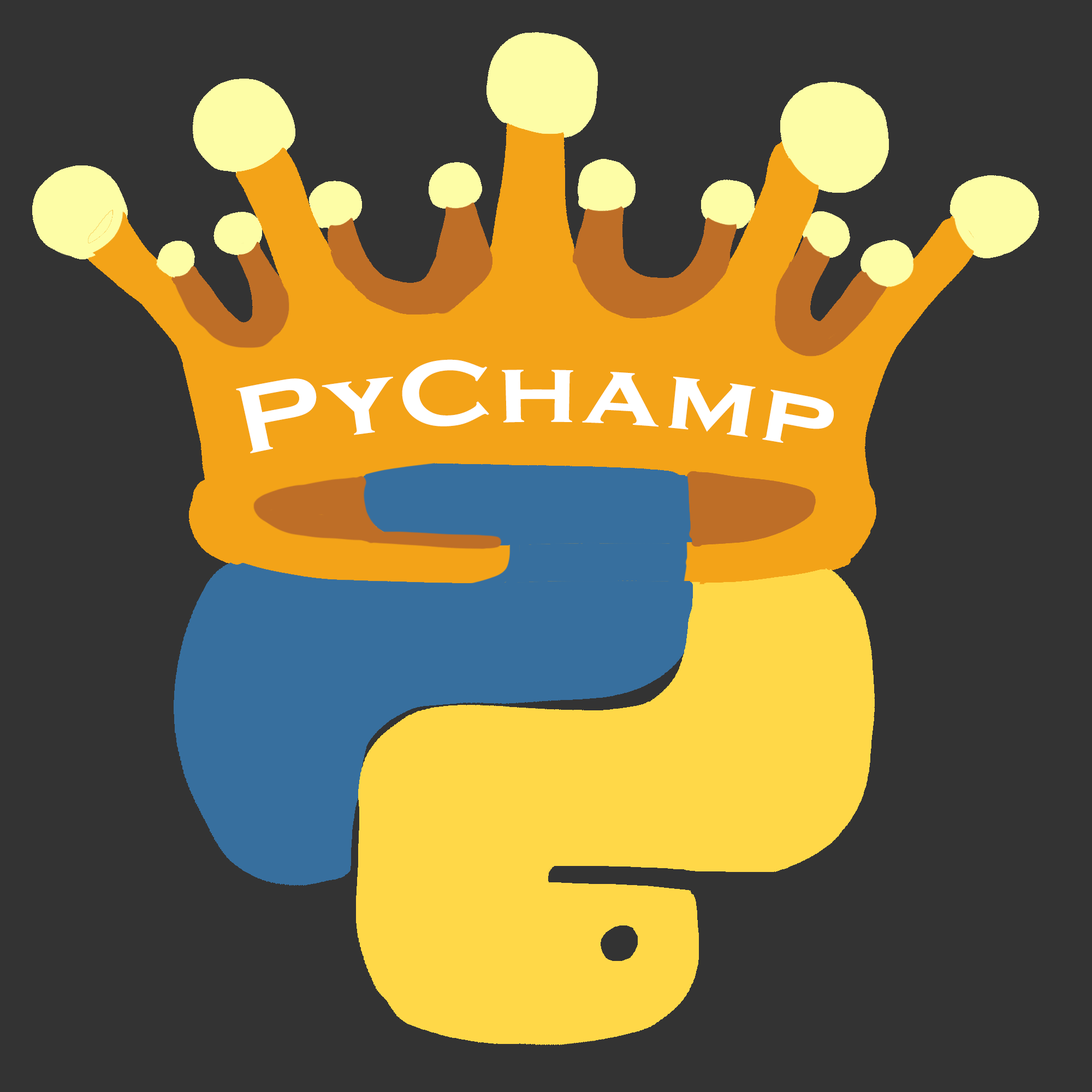
<style>
.page{position:relative;width:1092px;height:1092px;background:#333333}
.page>*{position:absolute;margin:0}
.t1{font:95.7px "CopperplateGothic-Bold";letter-spacing:0.04em;color:#ffffff;scale:1.12 1}
</style>
<div class="page">
<p class="t1" style="left:236px;top:359px;width:598px;height:95px">PyChamp</p>
</div>
